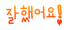
<style>
.page{position:relative;width:70px;height:30px;background:#ffffff}
.page>*{position:absolute;margin:0}
.t1{font:19.6px "UhBeeMiMi";letter-spacing:0.025em}
</style>
<div class="page">
<p class="t1" style="left:6px;top:4px;width:56px;height:21px">잘했어요!</p>
</div>
